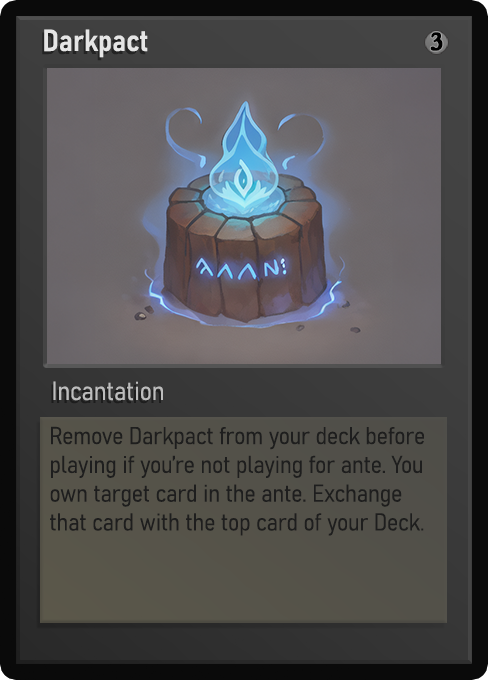
<style>
.page{position:relative;width:488px;height:680px}
.page>*{position:absolute;margin:0}
.t1{font:30px "Bahnschrift-SemiBoldSemiCondensed";color:#f2f2f2;font-weight:bold}
.t2{font:25px "WTRRoycroft";color:#000000;font-weight:bold;scale:1.09 1}
.t3{font:26px "Bahnschrift-LightSemiCondensed";color:#c8c8c8;font-weight:bold}
.t4{font:24px "Bahnschrift-LightSemiCondensed";color:#1e1e1e;font-weight:bold}
</style>
<div class="page">
<p class="t1" style="left:44px;top:29px;width:104px;height:29px;opacity:0.9">Darkpact</p>
<p class="t2" style="left:430px;top:32px;width:13px;height:19px">3</p>
<p class="t3" style="left:53px;top:381px;width:110px;height:20px;opacity:0.9">Incantation</p>
<p class="t4" style="left:50px;top:426px;width:374px;height:110px">Remove Darkpact from your deck before playing if you’re not playing for ante. You own target card in the ante. Exchange that card with the top card of your Deck.</p>
</div>
